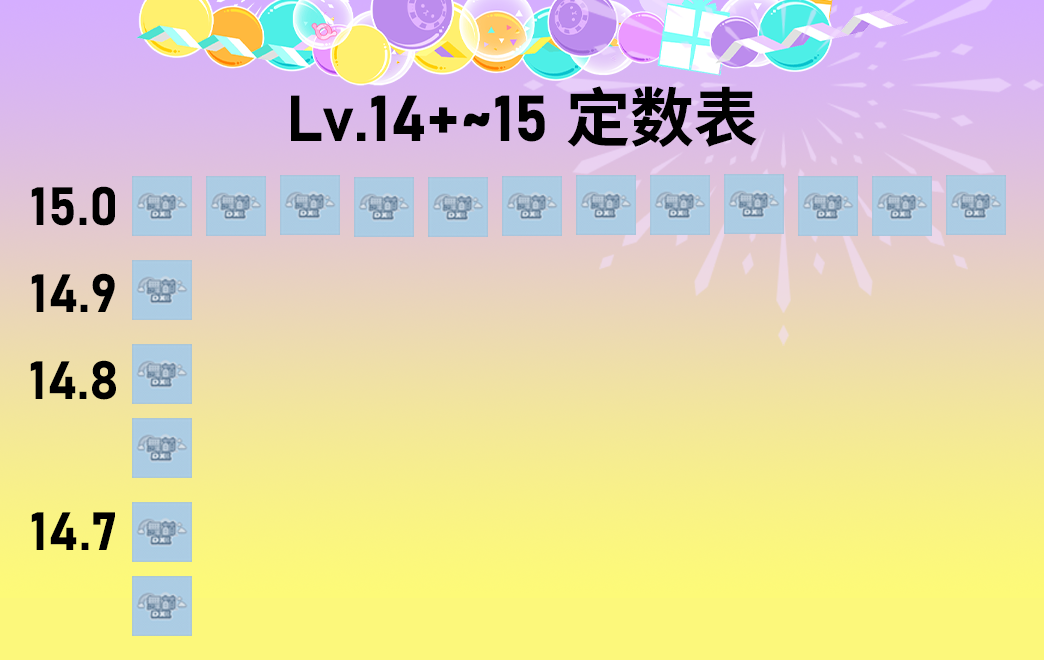
<style>
.page{position:relative;width:1044px;height:660px}
.page>*{position:absolute;margin:0}
.t1{font:64px "Bahnschrift-Bold";color:#000000}
.t2{font:64px "SourceHanSansSC-Bold";color:#000000}
.t3{font:53.3px "Bahnschrift-Bold";color:#000000}
</style>
<div class="page">
<p class="t1" style="left:291px;top:86px;width:466px;height:62px">Lv.14+~15 <span class="t2">定数表</span></p>
<p class="t3" style="left:31px;top:186px;width:84px;height:40px">15.0</p>
<p class="t3" style="left:31px;top:273px;width:84px;height:39px">14.9</p>
<p class="t3" style="left:30px;top:360px;width:86px;height:40px">14.8</p>
<p class="t3" style="left:31px;top:512px;width:84px;height:38px">14.7</p>
</div>
